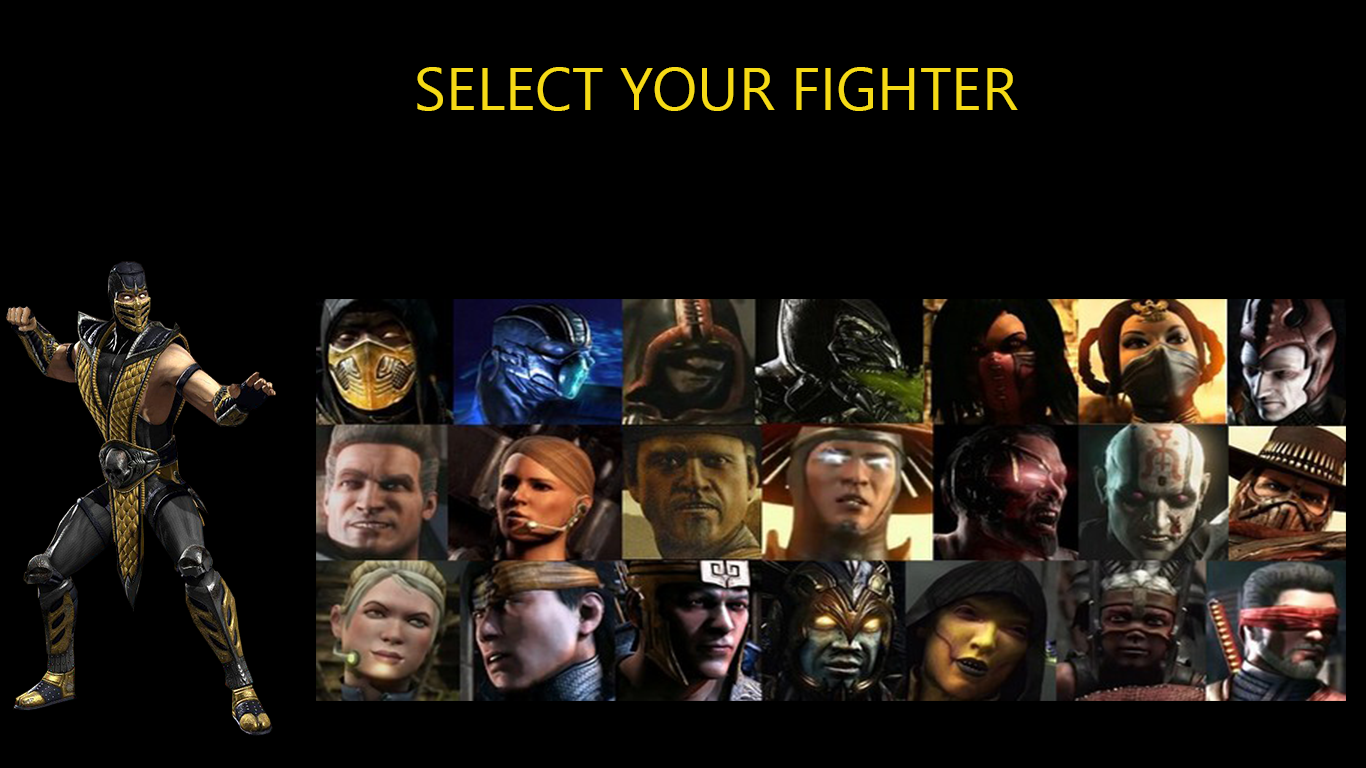
<style>
.page{position:relative;width:1366px;height:768px;background:#000000}
.page>*{position:absolute;margin:0}
.t1{font:60px "LeelawadeeUI";color:#f5da16}
.t2{font:48px "LeelawadeeUI";color:#f5da16}
</style>
<div class="page">
<p class="t1" style="left:417px;top:67px;width:601px;height:44px"><span class="t2"><br>                </span>SELECT YOUR FIGHTER</p>
</div>
